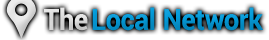
<style>
.page{position:relative;width:269px;height:40px;background:#ffffff}
.page>*{position:absolute;margin:0}
.t1{font:29.1px "Roboto-Bold";color:#049cdb;scale:0.94 1}
.t2{font:29.1px "Roboto-Bold";color:#e6e6e6;scale:0.94 1}
</style>
<div class="page">
<p class="t1" style="left:44px;top:7px;width:219px;height:24px"><span class="t2">The </span>Local Network</p>
</div>
